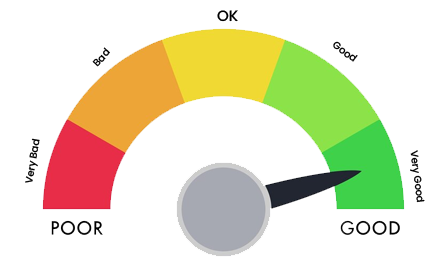
<style>
.page{position:relative;width:447px;height:261px;background:#ffffff}
.page>*{position:absolute;margin:0}
.t1{font:15px "Poppins-Medium";color:#000000}
.t2{font:10px "Poppins-Medium";color:#000000}
</style>
<div class="page">
<p class="t1" style="left:217px;top:10px;width:21px;height:12px">OK</p>
<p class="t2" style="left:333px;top:41px;width:25px;height:21px;rotate:37deg">Good</p>
<p class="t2" style="left:92px;top:47px;width:18px;height:20px;rotate:-48deg">Bad</p>
<p class="t2" style="left:25px;top:138px;width:15px;height:45px;rotate:-80deg">Very Bad</p>
<p class="t2" style="left:410px;top:150px;width:15px;height:53px;rotate:83deg">Very Good</p>
</div>
